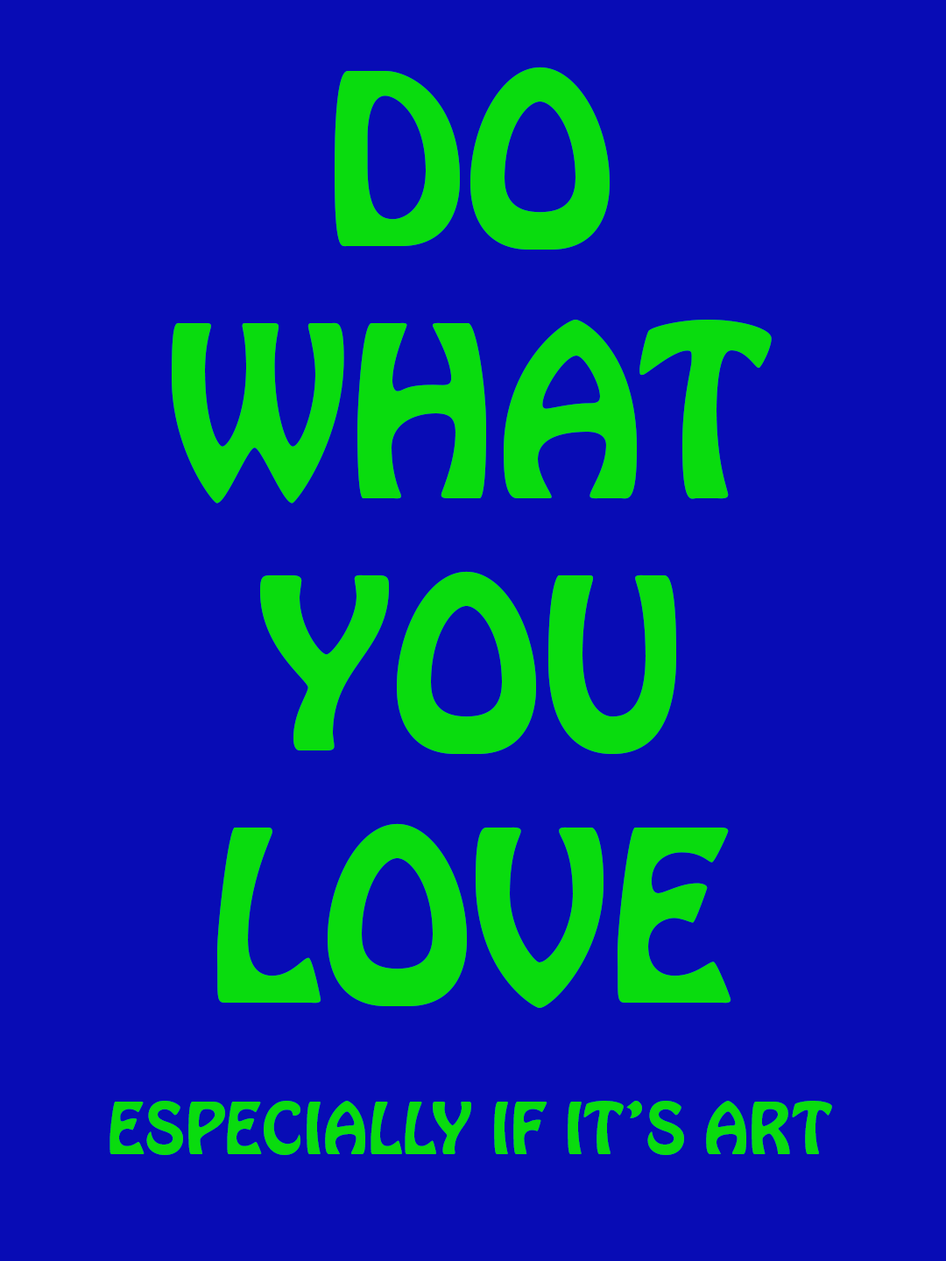
<style>
.page{position:relative;width:946px;height:1261px;background:#080cb5}
.page>*{position:absolute;margin:0}
.t1{font:63px "HoboStd";color:#09dc0e}
.t2{font:210.2px "HoboStd";color:#09dc0e}
</style>
<div class="page">
<p class="t1" style="left:109px;top:67px;width:723px;height:1088px;text-align:center"><span class="t2">DO WHAT YOU LOVE<br></span><br>ESPECIALLY IF IT’S ART</p>
</div>
